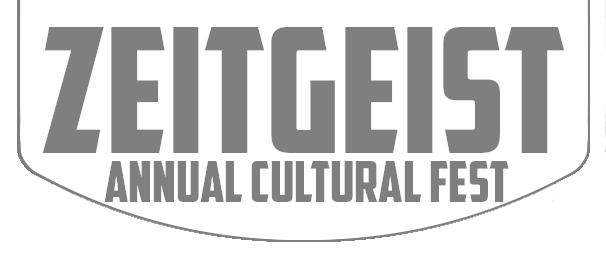
<style>
.page{position:relative;width:606px;height:256px;background:#ffffff}
.page>*{position:absolute;margin:0}
.t1{font:174px "AmericanCaptain";color:#7f7f7f}
.t2{font:56px "AmericanCaptain";color:#7f7f7f}
</style>
<div class="page">
<p class="t1" style="left:42px;top:27px;width:523px;height:126px">Zeitgeist</p>
<p class="t2" style="left:104px;top:161px;width:405px;height:41px">Annual Cultural Fest</p>
</div>
